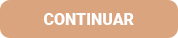
<style>
.page{position:relative;width:178px;height:38px;background:#daa47f}
.page>*{position:absolute;margin:0}
.t1{font:16px "Roboto-Black";color:#ffffff}
</style>
<div class="page">
<p class="t1" style="left:44px;top:13px;width:90px;height:12px">CONTINUAR</p>
</div>
